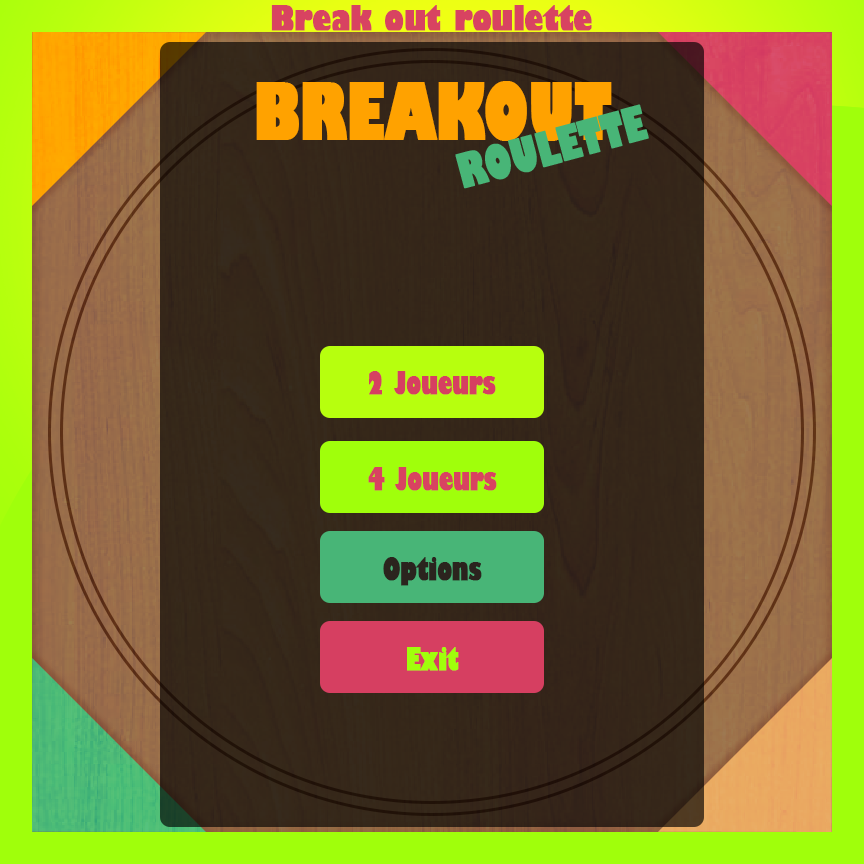
<style>
.page{position:relative;width:864px;height:864px}
.page>*{position:absolute;margin:0}
.t1{font:76.1px "GillSans-UltraBoldCondensed";letter-spacing:-0.02em;color:#ffa200;font-weight:bold}
.t2{font:30px "GillSans-UltraBoldCondensed";letter-spacing:-0.02em;color:#d63f61;font-weight:bold}
.t3{font:30px "GillSans-UltraBoldCondensed";letter-spacing:-0.02em;color:#d84361;font-weight:bold}
.t4{font:30px "GillSans-UltraBoldCondensed";letter-spacing:-0.02em;color:#2b241e;font-weight:bold}
.t5{font:30px "GillSans-UltraBoldCondensed";letter-spacing:-0.02em;color:#a0ff0b;font-weight:bold}
</style>
<div class="page">
<p class="t1" style="left:256px;top:81px;width:356px;height:60px">BREAKOUT</p>
<p class="t2" style="left:369px;top:371px;width:127px;height:24px">2 Joueurs</p>
<p class="t3" style="left:368px;top:467px;width:129px;height:24px">4 Joueurs</p>
<p class="t4" style="left:383px;top:557px;width:99px;height:29px">Options</p>
<p class="t5" style="left:407px;top:647px;width:52px;height:24px">Exit</p>
</div>
